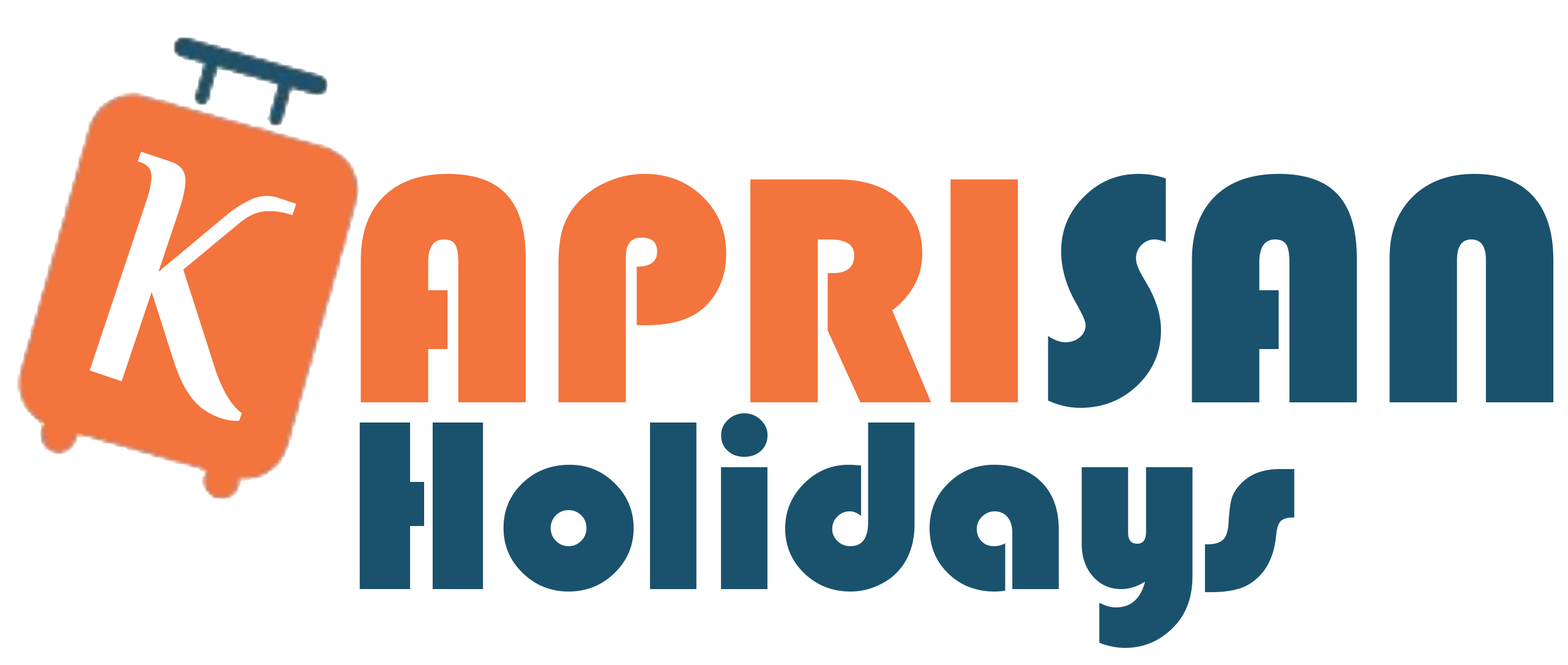
<style>
.page{position:relative;width:1568px;height:665px;background:#ffffff}
.page>*{position:absolute;margin:0}
.t1{font:334.5px "Bauhaus93";letter-spacing:-0.01em;color:#f3743d}
.t2{font:334.5px "Bauhaus93";letter-spacing:-0.01em;color:#1a526d}
.t3{font:249.9px "Bauhaus93";letter-spacing:-0.01em;color:#1a526d}
</style>
<div class="page">
<p class="t1" style="left:360px;top:174px;width:658px;height:228px">APRI</p>
<p class="t2" style="left:1048px;top:174px;width:506px;height:234px">SAN</p>
<p class="t3" style="left:359px;top:413px;width:935px;height:235px">Holidays</p>
</div>
